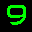
<style>
.page{position:relative;width:32px;height:32px;background:#000000}
.page>*{position:absolute;margin:0}
.t1{font:36px "BankGothic-Light";color:#00ff00}
</style>
<div class="page">
<p class="t1" style="left:7px;top:5px;width:19px;height:20px">9</p>
</div>
